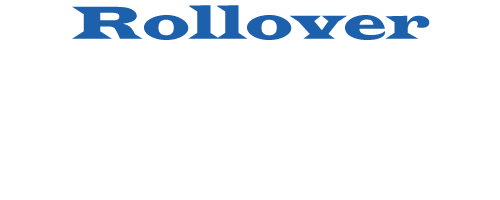
<style>
.page{position:relative;width:500px;height:200px;background:#ffffff}
.page>*{position:absolute;margin:0}
.t1{font:48px "LatinWide";color:#1d61ac}
</style>
<div class="page">
<p class="t1" style="left:72px;top:5px;width:358px;height:35px">Rollover</p>
</div>
